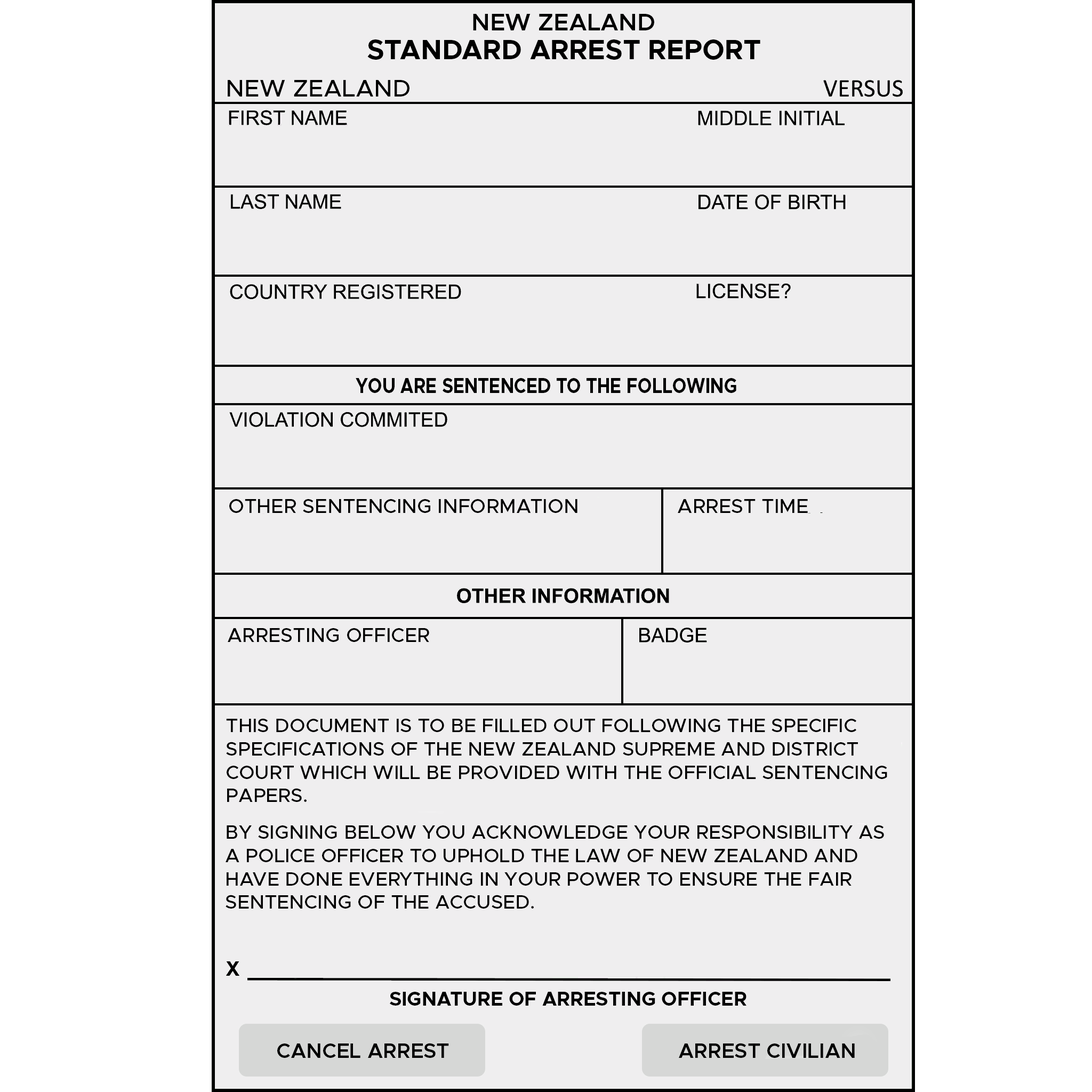
<style>
.page{position:relative;width:1092px;height:1092px;background:#efeeef}
.page>*{position:absolute;margin:0}
.t1{font:24px "Metropolis-SemiBold";color:#000000}
.t2{font:27.9px "Metropolis-Bold";color:#000000}
.t3{font:24px "Metropolis-Medium";color:#000000}
.t4{font:21.1px "Metropolis-Bold";color:#000000;scale:0.84 1}
.t5{font:19.7px "Metropolis-Medium";color:#000000}
.t6{font:19.4px "Metropolis-Medium";color:#000000}
.t7{font:19.8px "Metropolis-Bold";color:#000000}
.t8{font:20.7px "Metropolis-SemiBold";color:#000000}
</style>
<div class="page">
<p class="t1" style="left:473px;top:14px;width:181px;height:16px">NEW ZEALAND</p>
<p class="t2" style="left:367px;top:39px;width:393px;height:21px">STANDARD ARREST REPORT</p>
<p class="t3" style="left:228px;top:80px;width:181px;height:17px">NEW ZEALAND</p>
<p class="t4" style="left:356px;top:378px;width:380px;height:15px">YOU ARE SENTENCED TO THE FOLLOWING</p>
<p class="t5" style="left:229px;top:499px;width:348px;height:14px">OTHER SENTENCING INFORMATION</p>
<p class="t5" style="left:678px;top:499px;width:130px;height:14px">ARREST TIME</p>
<p class="t5" style="left:228px;top:628px;width:201px;height:14px">ARRESTING OFFICER</p>
<p class="t6" style="left:226px;top:718px;width:661px;height:84px">THIS DOCUMENT IS TO BE FILLED OUT FOLLOWING THE SPECIFIC<br>SPECIFICATIONS OF THE NEW ZEALAND SUPREME AND DISTRICT <br>COURT WHICH WILL BE PROVIDED WITH THE OFFICIAL SENTENCING<br>PAPERS.</p>
<p class="t6" style="left:226px;top:825px;width:658px;height:84px">BY SIGNING BELOW YOU ACKNOWLEDGE YOUR RESPONSIBILITY AS<br>A POLICE OFFICER TO UPHOLD THE LAW OF NEW ZEALAND AND <br>HAVE DONE EVERYTHING IN YOUR POWER TO ENSURE THE FAIR<br>SENTENCING OF THE ACCUSED.</p>
<p class="t7" style="left:390px;top:992px;width:356px;height:14px">SIGNATURE OF ARRESTING OFFICER</p>
<p class="t8" style="left:277px;top:1043px;width:172px;height:15px">CANCEL ARREST</p>
<p class="t8" style="left:679px;top:1043px;width:176px;height:15px">ARREST CIVILIAN</p>
</div>
